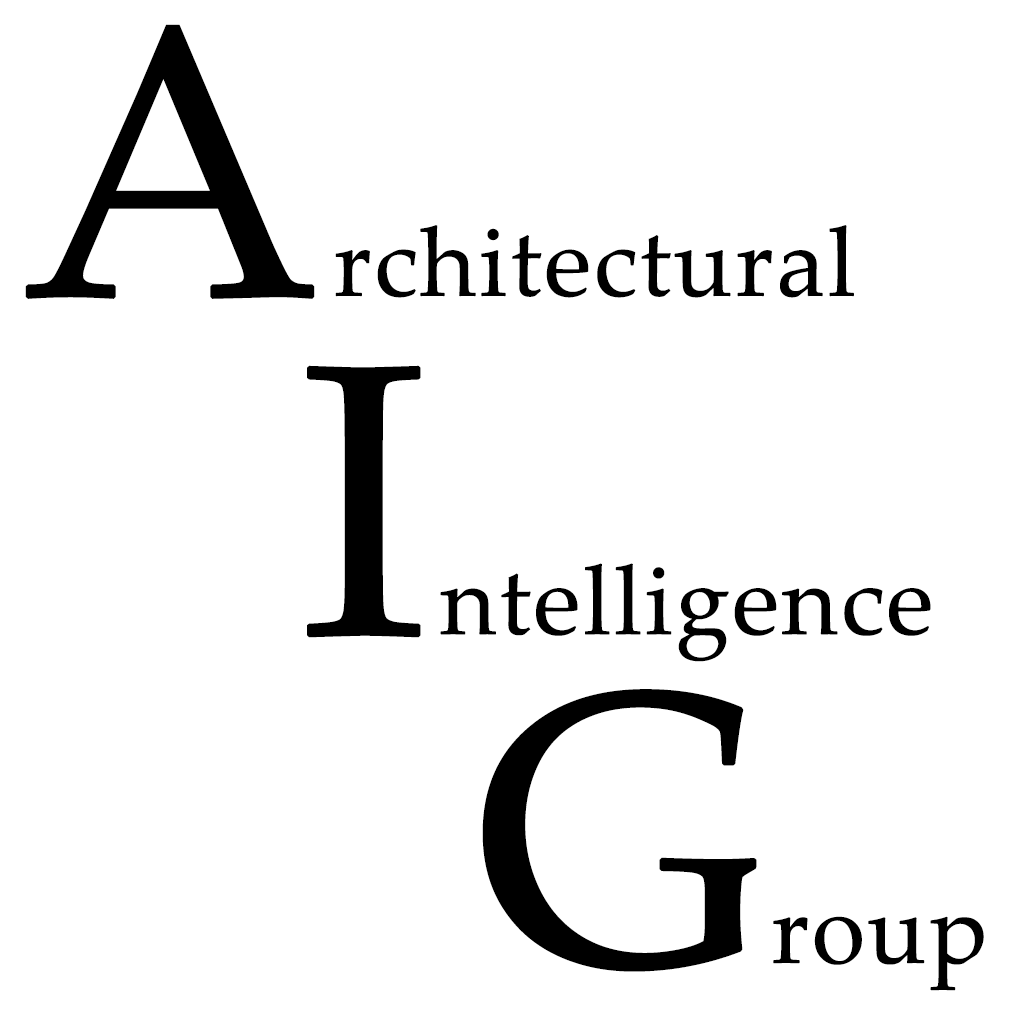
<style>
.page{position:relative;width:1024px;height:1024px;background:#ffffff}
.page>*{position:absolute;margin:0}
.t1{font:389px "PalatinoLinotype-Roman";color:#000000;font-weight:bold}
.t2{font:97.3px "PalatinoLinotype-Roman";color:#000000;font-weight:bold}
</style>
<div class="page">
<p class="t1" style="left:25px;top:24px;width:290px;height:275px">A</p>
<p class="t2" style="left:335px;top:225px;width:519px;height:73px">rchitectural</p>
<p class="t1" style="left:307px;top:365px;width:114px;height:273px">I</p>
<p class="t2" style="left:440px;top:563px;width:491px;height:99px">ntelligence</p>
<p class="t1" style="left:482px;top:689px;width:275px;height:283px">G</p>
<p class="t2" style="left:773px;top:916px;width:211px;height:75px">roup</p>
</div>
